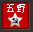
<style>
.page{position:relative;width:33px;height:32px;background:#c50000}
.page>*{position:absolute;margin:0}
.t1{font:10.4px "SimSun";color:#ffffff}
</style>
<div class="page">
<p class="t1" style="left:7px;top:4px;width:18px;height:9px">五野</p>
</div>
